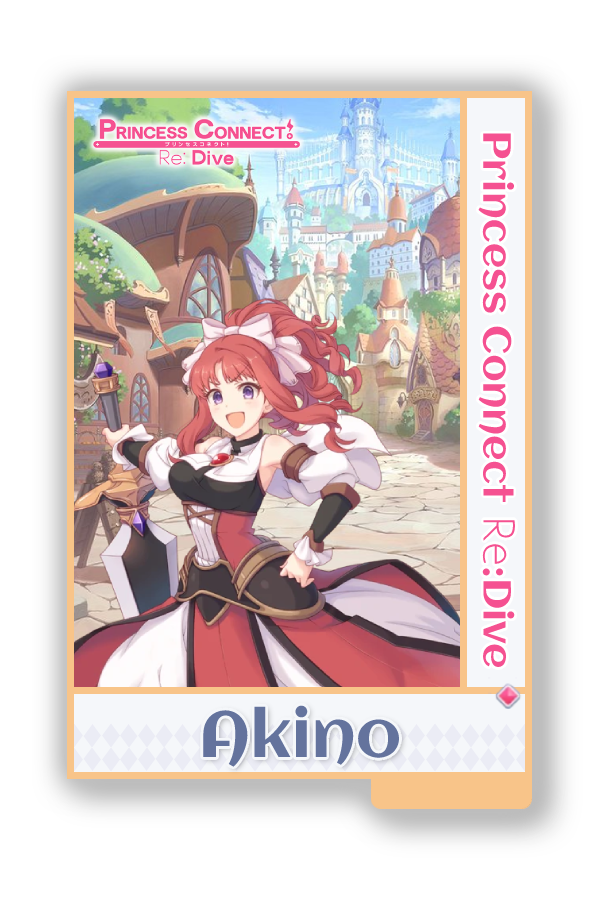
<style>
.page{position:relative;width:600px;height:900px;background:#ffffff}
.page>*{position:absolute;margin:0}
.t1{font:39px "Aclonica-Regular";color:#f55191}
.t2{font:39px "AaarghNormal";color:#f55191}
.t3{font:65px "Aclonica-Regular";color:#64739d}
</style>
<div class="page">
<p class="t1" style="left:478px;top:133px;width:38px;height:534px;rotate:90deg">Princess Connect <span class="t2">Re</span>:Dive</p>
<p class="t3" style="left:203px;top:705px;width:197px;height:62px">Akino</p>
</div>
